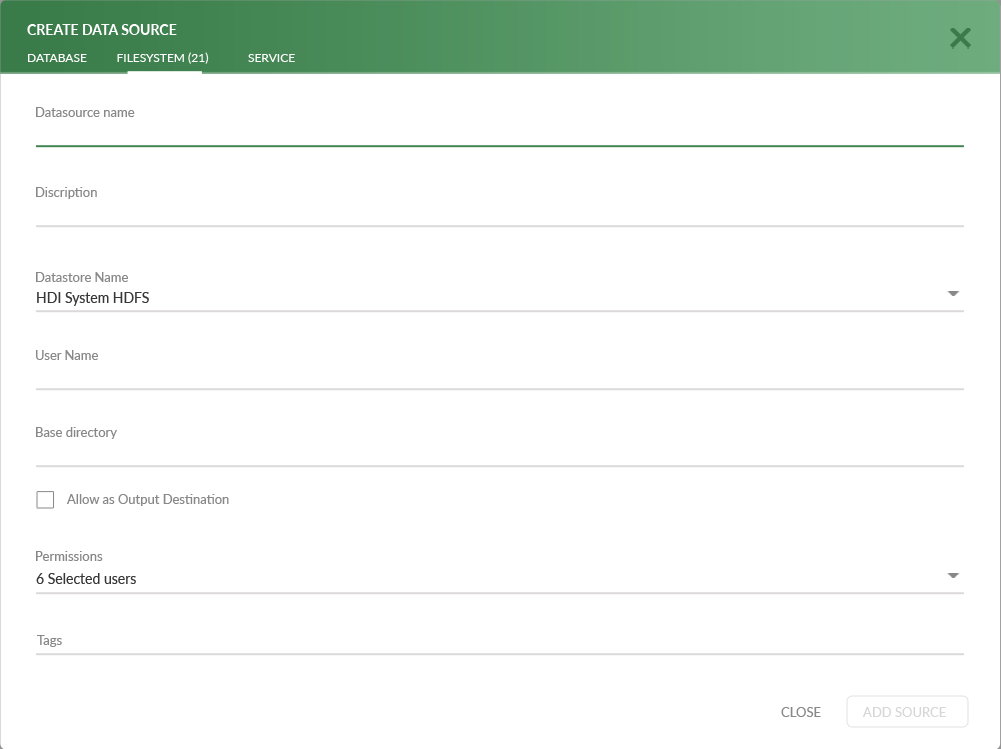
<style>
.page{position:relative;width:1001px;height:749px;background:#ffffff}
.page>*{position:absolute;margin:0}
.t1{font:14px "Lato-Bold";color:#ffffff}
.t2{font:12px "Lato-Regular";color:#ffffff}
.t3{font:13px "Lato-Regular";color:#898888}
.t4{font:14px "Lato-Regular";color:#393838}
.t5{font:13px "Lato-Regular";color:#d8d6d6}
</style>
<div class="page">
<p class="t1" style="left:27px;top:24px;width:150px;height:11px">CREATE DATA SOURCE</p>
<p class="t2" style="left:28px;top:54px;width:59px;height:8px">DATABASE</p>
<p class="t2" style="left:117px;top:52px;width:92px;height:12px">FILESYSTEM (21)</p>
<p class="t2" style="left:248px;top:54px;width:47px;height:8px">SERVICE</p>
<p class="t3" style="left:36px;top:107px;width:99px;height:10px">Datasource name</p>
<p class="t3" style="left:36px;top:187px;width:61px;height:12px">Discription</p>
<p class="t3" style="left:36px;top:272px;width:92px;height:10px">Datastore Name</p>
<p class="t4" style="left:37px;top:292px;width:112px;height:14px">HDI System HDFS</p>
<p class="t3" style="left:36px;top:350px;width:62px;height:10px">User Name</p>
<p class="t3" style="left:36px;top:427px;width:81px;height:12px">Base directory</p>
<p class="t3" style="left:66px;top:494px;width:163px;height:12px">Allow as Output Destination</p>
<p class="t3" style="left:36px;top:551px;width:67px;height:10px">Permissions</p>
<p class="t4" style="left:36px;top:573px;width:100px;height:11px">6 Selected users</p>
<p class="t3" style="left:37px;top:635px;width:25px;height:12px">Tags</p>
<p class="t3" style="left:781px;top:707px;width:40px;height:10px">CLOSE</p>
<p class="t5" style="left:862px;top:707px;width:84px;height:10px">ADD SOURCE</p>
</div>
